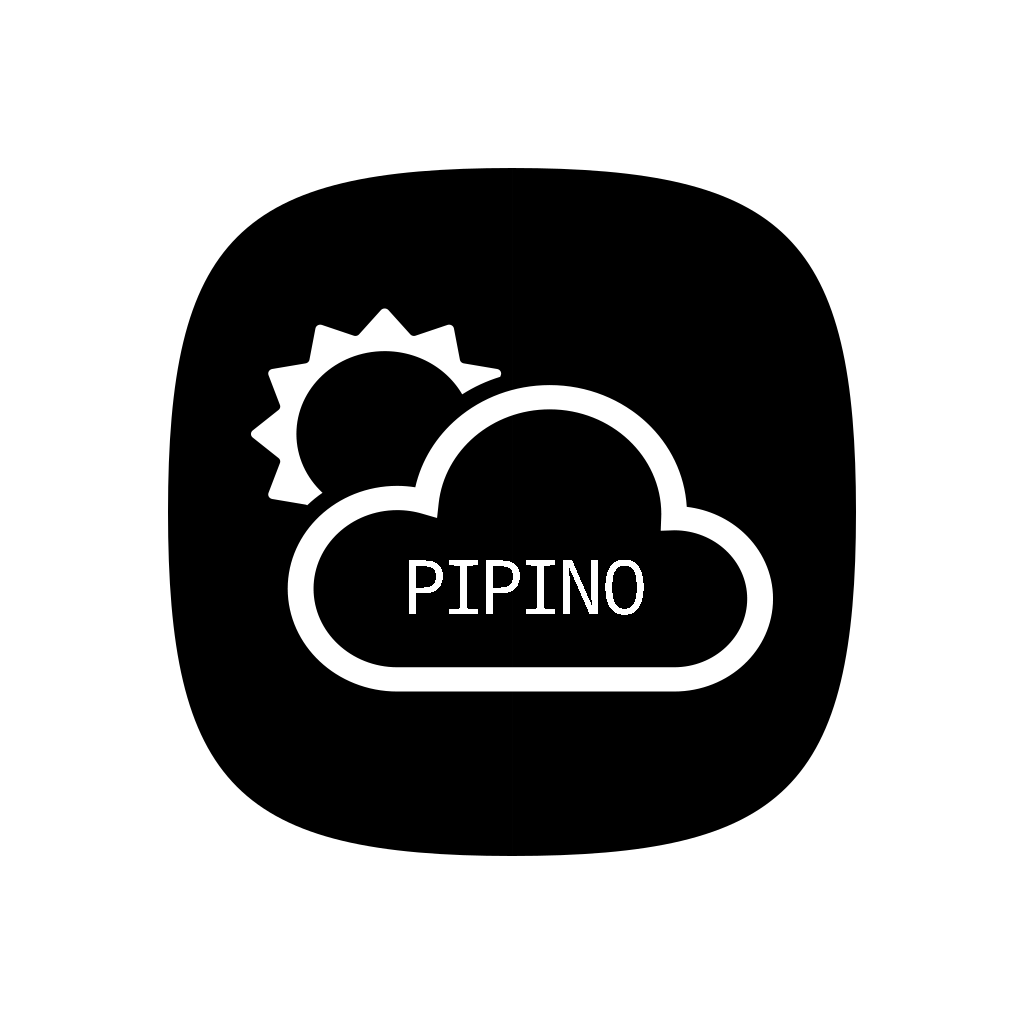
<style>
.page{position:relative;width:1024px;height:1024px;background:#ffffff}
.page>*{position:absolute;margin:0}
.t1{font:75px "NotoSansMono-Regular";color:#ffffff}
</style>
<div class="page">
<p class="t1" style="left:409px;top:560px;width:235px;height:55px">PIPINO</p>
</div>
